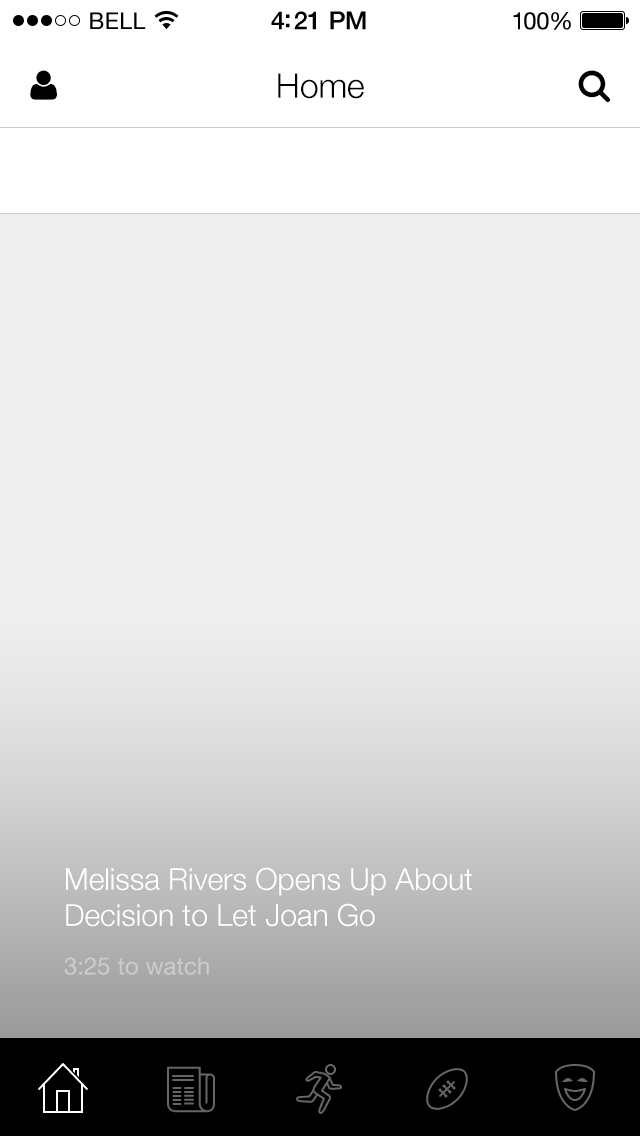
<style>
.page{position:relative;width:640px;height:1136px;background:#eeeeee}
.page>*{position:absolute;margin:0}
.t1{font:23px "HelveticaNeue";letter-spacing:0.02em;color:#000000}
.t2{font:25px "HelveticaNeue-Medium";letter-spacing:-0.02em;color:#000000}
.t3{font:24px "HelveticaNeue";letter-spacing:-0.02em;color:#010101}
.t4{font:34px "HelveticaNeue-Light";color:#000000}
.t5{font:30px "HelveticaNeue-Light";color:#ffffff}
.t6{font:24px "HelveticaNeue";color:#cccccc}
</style>
<div class="page">
<p class="t1" style="left:90px;top:12px;width:56px;height:17px">BELL</p>
<p class="t2" style="left:271px;top:11px;width:95px;height:19px">4:21 PM</p>
<p class="t3" style="left:513px;top:12px;width:58px;height:18px">100%</p>
<p class="t4" style="left:278px;top:73px;width:86px;height:26px">Home</p>
<p class="t5" style="left:64px;top:867px;width:408px;height:108px">Melissa Rivers Opens Up About Decision to Let Joan Go<br><span class="t6">3:25 to watch</span></p>
<p class="t5" style="left:64px;top:867px;width:408px;height:108px">Melissa Rivers Opens Up About Decision to Let Joan Go<br><span class="t6">3:25 to watch</span></p>
<p class="t5" style="left:64px;top:867px;width:408px;height:108px">Melissa Rivers Opens Up About Decision to Let Joan Go<br><span class="t6">3:25 to watch</span></p>
<p class="t5" style="left:64px;top:867px;width:408px;height:108px">Melissa Rivers Opens Up About Decision to Let Joan Go<br><span class="t6">3:25 to watch</span></p>
<p class="t5" style="left:64px;top:867px;width:408px;height:108px">Melissa Rivers Opens Up About Decision to Let Joan Go<br><span class="t6">3:25 to watch</span></p>
</div>
